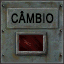
<style>
.page{position:relative;width:64px;height:64px}
.page>*{position:absolute;margin:0}
.t1{font:12.8px "ArialMT";letter-spacing:0.025em;color:#000000;font-weight:bold;scale:0.79 1}
</style>
<div class="page">
<p class="t1" style="left:11px;top:11px;width:43px;height:13px">CÂMBIO</p>
</div>
